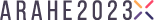
<style>
.page{position:relative;width:154px;height:20px;background:#ffffff}
.page>*{position:absolute;margin:0}
.t1{font:27.5px "BebasNeueRegular";letter-spacing:0.16em;color:#463e53}
</style>
<div class="page">
<p class="t1" style="left:0px;top:0px;width:132px;height:20px">ARAHE2023</p>
</div>
